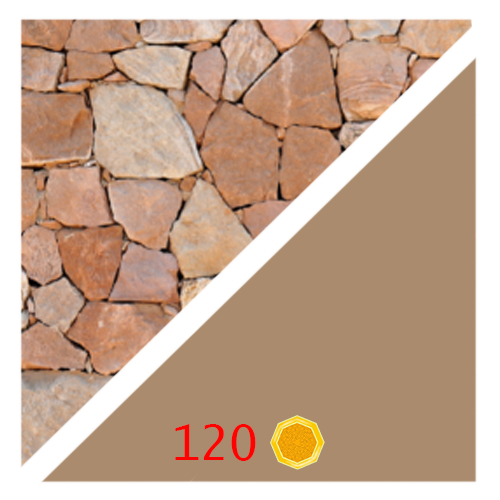
<style>
.page{position:relative;width:500px;height:500px;background:#aa8b6d}
.page>*{position:absolute;margin:0}
.t1{font:48px "LucidaConsole";color:#ff0101}
</style>
<div class="page">
<p class="t1" style="left:175px;top:424px;width:81px;height:37px">120</p>
</div>
